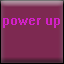
<style>
.page{position:relative;width:64px;height:64px;background:#7d2951}
.page>*{position:absolute;margin:0}
.t1{font:12px "System";color:#d220c8}
</style>
<div class="page">
<p class="t1" style="left:3px;top:18px;width:57px;height:10px">power up</p>
</div>
